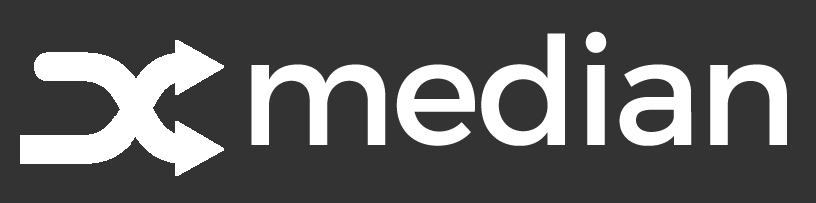
<style>
.page{position:relative;width:816px;height:203px;background:#333333}
.page>*{position:absolute;margin:0}
.t1{font:150px "Montserrat-Regular";letter-spacing:-0.025em;color:#ffffff}
</style>
<div class="page">
<p class="t1" style="left:251px;top:31px;width:536px;height:115px">median</p>
</div>
